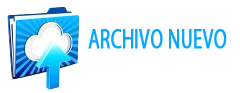
<style>
.page{position:relative;width:240px;height:93px;background:#ffffff}
.page>*{position:absolute;margin:0}
.t1{font:27.4px "MyriadPro-Regular";color:#06a8fd;font-weight:bold;scale:0.68 1}
</style>
<div class="page">
<p class="t1" style="left:88px;top:29px;width:139px;height:20px">ARCHIVO NUEVO</p>
</div>
